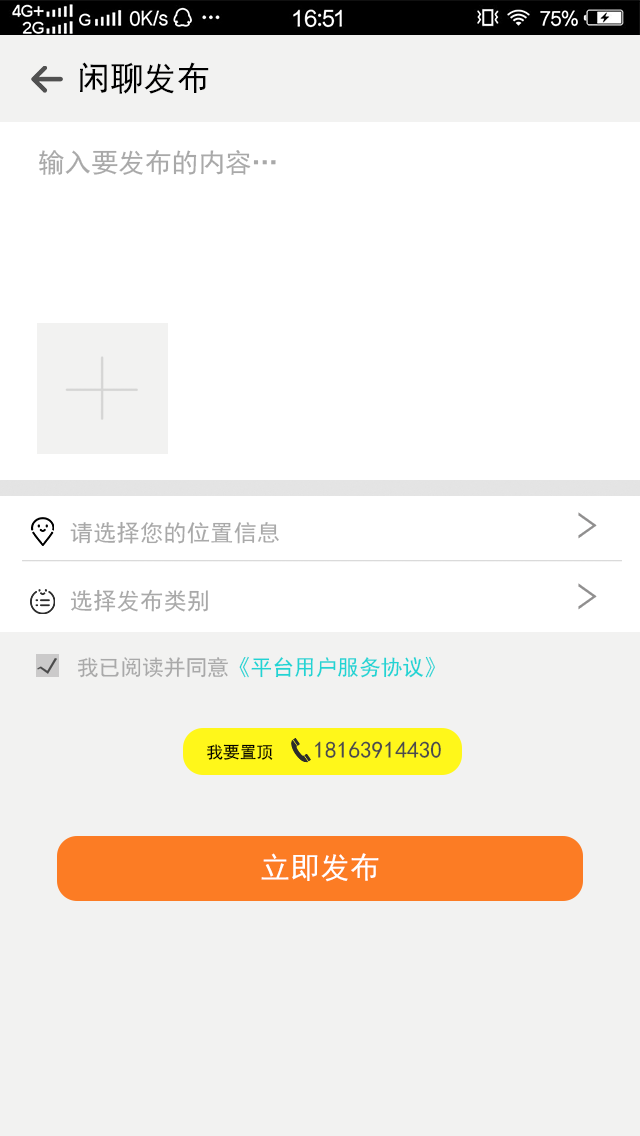
<style>
.page{position:relative;width:640px;height:1136px;background:#f2f2f1}
.page>*{position:absolute;margin:0}
.t1{font:33.3px "SimHei";letter-spacing:0.002em;color:#000000}
.t2{font:26.7px "SimHei";letter-spacing:0.002em;color:#a9a9a9}
.t3{font:23.3px "SimHei";letter-spacing:0.002em;color:#a9a9a9}
.t4{font:21.7px "SimHei";letter-spacing:0.002em;color:#21d4d4}
.t5{font:21.7px "SimHei";letter-spacing:0.002em;color:#a9a9a9}
.t6{font:16.7px "SimHei";letter-spacing:0.002em;color:#010101}
.t7{font:23.3px "SimHei";letter-spacing:0.002em;color:#4b4b4b}
.t8{font:30px "SimHei";letter-spacing:0.002em;color:#ffffff}
</style>
<div class="page">
<p class="t1" style="left:80px;top:62px;width:129px;height:32px">闲聊发布</p>
<p class="t2" style="left:39px;top:149px;width:237px;height:26px">输入要发布的内容…</p>
<p class="t3" style="left:70px;top:521px;width:209px;height:23px">请选择您的位置信息</p>
<p class="t3" style="left:70px;top:589px;width:138px;height:23px">选择发布类别</p>
<p class="t4" style="left:77px;top:656px;width:358px;height:22px"><span class="t5">我已阅读并同意</span>《平台用户服务协议》</p>
<p class="t6" style="left:207px;top:744px;width:66px;height:16px">我要置顶</p>
<p class="t7" style="left:315px;top:741px;width:126px;height:17px">18163914430</p>
<p class="t8" style="left:261px;top:853px;width:118px;height:29px">立即发布</p>
</div>
